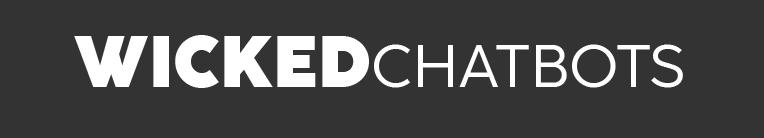
<style>
.page{position:relative;width:764px;height:138px;background:#333333}
.page>*{position:absolute;margin:0}
.t1{font:60px "CocoSharpTrial-Regular";color:#ffffff}
.t2{font:72px "CocoSharpXLTrial-Heavy";color:#ffffff}
</style>
<div class="page">
<p class="t1" style="left:74px;top:35px;width:609px;height:53px"><span class="t2">WICKED</span>CHATBOTS</p>
</div>
